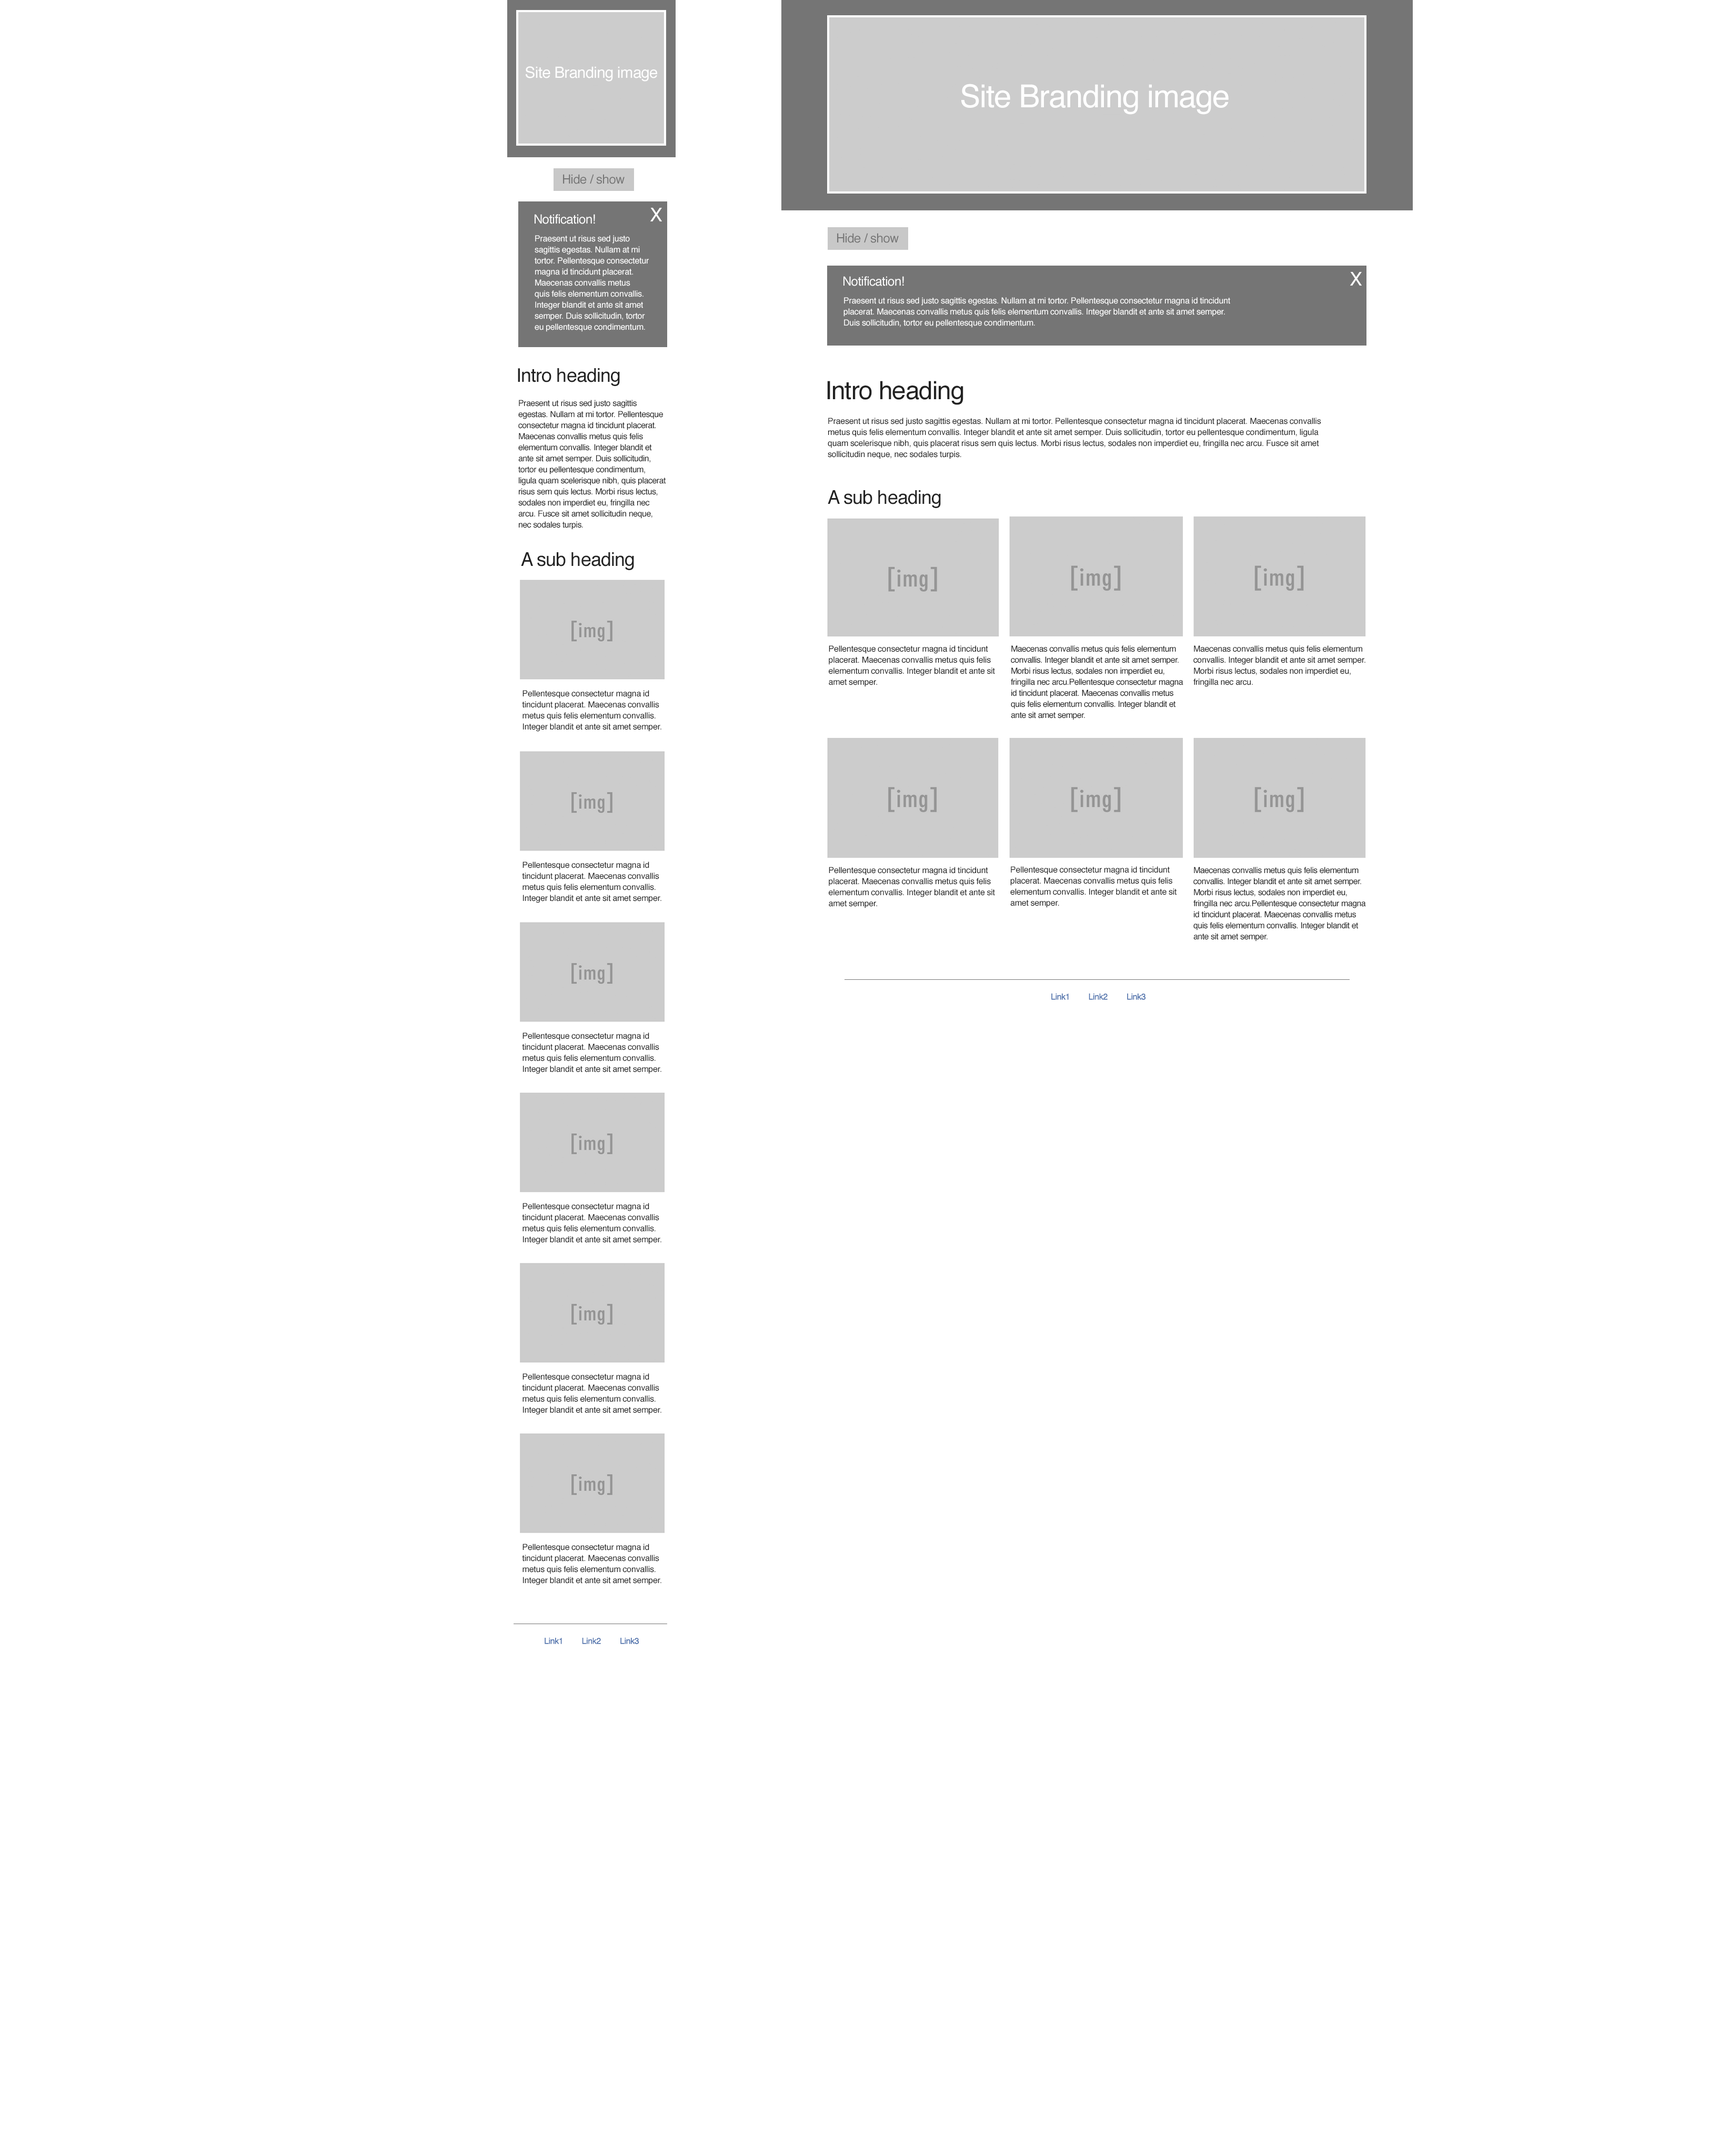
<style>
.page{position:relative;width:1709px;height:2129px;background:#ffffff}
.page>*{position:absolute;margin:0}
.t1{font:15.5px "Helvetica";letter-spacing:-0.025em;color:#ffffff}
.t2{font:31.6px "Helvetica";letter-spacing:-0.025em;color:#ffffff}
.t3{font:12.6px "Helvetica";letter-spacing:-0.025em;color:#757575}
.t4{font:18.9px "Helvetica";letter-spacing:-0.025em;color:#ffffff}
.t5{font:12.6px "Helvetica";letter-spacing:-0.025em;color:#ffffff}
.t6{font:8.4px/11px "Helvetica";letter-spacing:-0.025em;color:#ffffff}
.t7{font:18.9px "Helvetica";letter-spacing:-0.025em;color:#222222}
.t8{font:25.2px "Helvetica";letter-spacing:-0.025em;color:#222222}
.t9{font:8.4px/11px "Helvetica";letter-spacing:-0.025em;color:#222222}
.t10{font:8.4px "Helvetica";letter-spacing:-0.025em;color:#5375ae}
</style>
<div class="page">
<p class="t1" style="left:526px;top:66px;width:131px;height:16px">Site Branding image</p>
<p class="t2" style="left:961px;top:84px;width:267px;height:31px">Site Branding image</p>
<p class="t3" style="left:563px;top:174px;width:61px;height:10px">Hide / show</p>
<p class="t4" style="left:650px;top:208px;width:12px;height:13px">X</p>
<p class="t5" style="left:534px;top:214px;width:61px;height:10px">Notification!</p>
<p class="t3" style="left:837px;top:233px;width:61px;height:10px">Hide / show</p>
<p class="t6" style="left:534px;top:235px;width:115px;height:97px">Praesent ut risus sed justo sagittis egestas. Nullam at mi tortor. Pellentesque consectetur magna id tincidunt placerat. Maecenas convallis metus quis felis elementum convallis. Integer blandit et ante sit amet semper. Duis sollicitudin, tortor eu pellentesque condimentum.</p>
<p class="t5" style="left:843px;top:276px;width:61px;height:10px">Notification!</p>
<p class="t4" style="left:1350px;top:272px;width:11px;height:14px">X</p>
<p class="t6" style="left:843px;top:297px;width:387px;height:31px">Praesent ut risus sed justo sagittis egestas. Nullam at mi tortor. Pellentesque consectetur magna id tincidunt placerat. Maecenas convallis metus quis felis elementum convallis. Integer blandit et ante sit amet semper. Duis sollicitudin, tortor eu pellentesque condimentum.</p>
<p class="t7" style="left:518px;top:368px;width:102px;height:18px">Intro heading</p>
<p class="t8" style="left:827px;top:381px;width:136px;height:24px">Intro heading</p>
<p class="t9" style="left:518px;top:400px;width:147px;height:130px">Praesent ut risus sed justo sagittis egestas. Nullam at mi tortor. Pellentesque consectetur magna id tincidunt placerat. Maecenas convallis metus quis felis elementum convallis. Integer blandit et ante sit amet semper. Duis sollicitudin, tortor eu pellentesque condimentum, ligula quam scelerisque nibh, quis placerat risus sem quis lectus. Morbi risus lectus, sodales non imperdiet eu, fringilla nec arcu. Fusce sit amet sollicitudin neque, nec sodales turpis.</p>
<p class="t9" style="left:827px;top:418px;width:494px;height:41px">Praesent ut risus sed justo sagittis egestas. Nullam at mi tortor. Pellentesque consectetur magna id tincidunt placerat. Maecenas convallis metus quis felis elementum convallis. Integer blandit et ante sit amet semper. Duis sollicitudin, tortor eu pellentesque condimentum, ligula quam scelerisque nibh, quis placerat risus sem quis lectus. Morbi risus lectus, sodales non imperdiet eu, fringilla nec arcu. Fusce sit amet sollicitudin neque, nec sodales turpis.</p>
<p class="t7" style="left:827px;top:490px;width:114px;height:18px">A sub heading</p>
<p class="t7" style="left:521px;top:552px;width:113px;height:18px">A sub heading</p>
<p class="t9" style="left:828px;top:645px;width:167px;height:42px">Pellentesque consectetur magna id tincidunt placerat. Maecenas convallis metus quis felis elementum convallis. Integer blandit et ante sit amet semper.</p>
<p class="t9" style="left:1011px;top:645px;width:172px;height:75px">Maecenas convallis metus quis felis elementum convallis. Integer blandit et ante sit amet semper. Morbi risus lectus, sodales non imperdiet eu, fringilla nec arcu.Pellentesque consectetur magna id tincidunt placerat. Maecenas convallis metus quis felis elementum convallis. Integer blandit et ante sit amet semper.</p>
<p class="t9" style="left:1193px;top:645px;width:172px;height:42px">Maecenas convallis metus quis felis elementum convallis. Integer blandit et ante sit amet semper. Morbi risus lectus, sodales non imperdiet eu, fringilla nec arcu.</p>
<p class="t9" style="left:522px;top:690px;width:139px;height:42px">Pellentesque consectetur magna id tincidunt placerat. Maecenas convallis metus quis felis elementum convallis. Integer blandit et ante sit amet semper.</p>
<p class="t9" style="left:522px;top:862px;width:139px;height:41px">Pellentesque consectetur magna id tincidunt placerat. Maecenas convallis metus quis felis elementum convallis. Integer blandit et ante sit amet semper.</p>
<p class="t9" style="left:828px;top:867px;width:167px;height:41px">Pellentesque consectetur magna id tincidunt placerat. Maecenas convallis metus quis felis elementum convallis. Integer blandit et ante sit amet semper.</p>
<p class="t9" style="left:1010px;top:866px;width:166px;height:42px">Pellentesque consectetur magna id tincidunt placerat. Maecenas convallis metus quis felis elementum convallis. Integer blandit et ante sit amet semper.</p>
<p class="t9" style="left:1193px;top:867px;width:173px;height:75px">Maecenas convallis metus quis felis elementum convallis. Integer blandit et ante sit amet semper. Morbi risus lectus, sodales non imperdiet eu, fringilla nec arcu.Pellentesque consectetur magna id tincidunt placerat. Maecenas convallis metus quis felis elementum convallis. Integer blandit et ante sit amet semper.</p>
<p class="t10" style="left:1051px;top:994px;width:95px;height:6px">Link1 Link2  Link3</p>
<p class="t9" style="left:522px;top:1033px;width:139px;height:41px">Pellentesque consectetur magna id tincidunt placerat. Maecenas convallis metus quis felis elementum convallis. Integer blandit et ante sit amet semper.</p>
<p class="t9" style="left:522px;top:1203px;width:139px;height:42px">Pellentesque consectetur magna id tincidunt placerat. Maecenas convallis metus quis felis elementum convallis. Integer blandit et ante sit amet semper.</p>
<p class="t9" style="left:522px;top:1373px;width:139px;height:42px">Pellentesque consectetur magna id tincidunt placerat. Maecenas convallis metus quis felis elementum convallis. Integer blandit et ante sit amet semper.</p>
<p class="t9" style="left:522px;top:1544px;width:139px;height:41px">Pellentesque consectetur magna id tincidunt placerat. Maecenas convallis metus quis felis elementum convallis. Integer blandit et ante sit amet semper.</p>
<p class="t10" style="left:544px;top:1638px;width:95px;height:6px">Link1 Link2  Link3</p>
</div>
